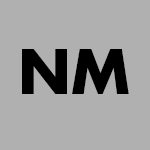
<style>
.page{position:relative;width:150px;height:150px;background:#b0b0b0}
.page>*{position:absolute;margin:0}
.t1{font:60px "Futura-Bold";color:#000000}
</style>
<div class="page">
<p class="t1" style="left:22px;top:49px;width:107px;height:45px">NM</p>
</div>
